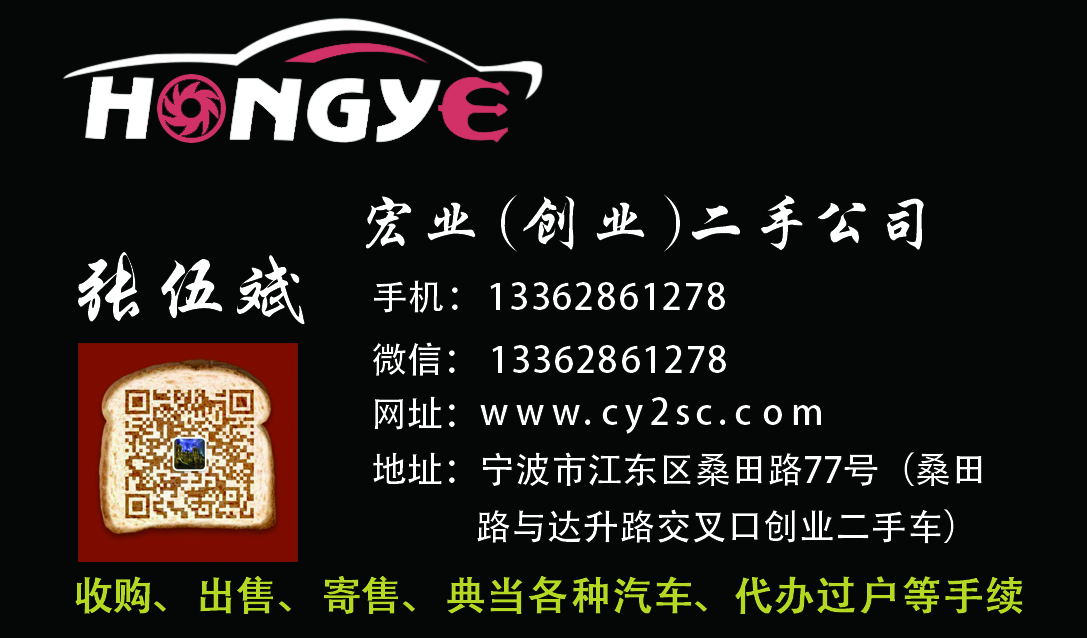
<style>
.page{position:relative;width:1087px;height:638px;background:#040706}
.page>*{position:absolute;margin:0}
.t1{font:62px "FZXKJW--GB1-0";color:#ffffff}
.t2{font:80px "FZXKJW--GB1-0";color:#ffffff}
.t3{font:36px "AdobeHeitiStd-Regular";color:#ffffff}
.t4{font:40px "AdobeHeitiStd-Regular";color:#b5d922;font-weight:bold}
</style>
<div class="page">
<p class="t1" style="left:365px;top:194px;width:559px;height:58px">宏业（创业）二手公司</p>
<p class="t2" style="left:78px;top:252px;width:227px;height:73px">张伍斌</p>
<p class="t3" style="left:374px;top:280px;width:351px;height:33px">手机：13362861278</p>
<p class="t3" style="left:372px;top:342px;width:354px;height:34px">微信：13362861278</p>
<p class="t3" style="left:374px;top:396px;width:81px;height:34px">网址：</p>
<p class="t3" style="left:480px;top:397px;width:341px;height:37px">www.cy2sc.com</p>
<p class="t3" style="left:373px;top:452px;width:609px;height:35px">地址：宁波市江东区桑田路77号（桑田</p>
<p class="t3" style="left:477px;top:509px;width:477px;height:35px">路与达升路交叉口创业二手车）</p>
<p class="t4" style="left:75px;top:576px;width:948px;height:38px">收购、出售、寄售、典当各种汽车、代办过户等手续</p>
</div>
